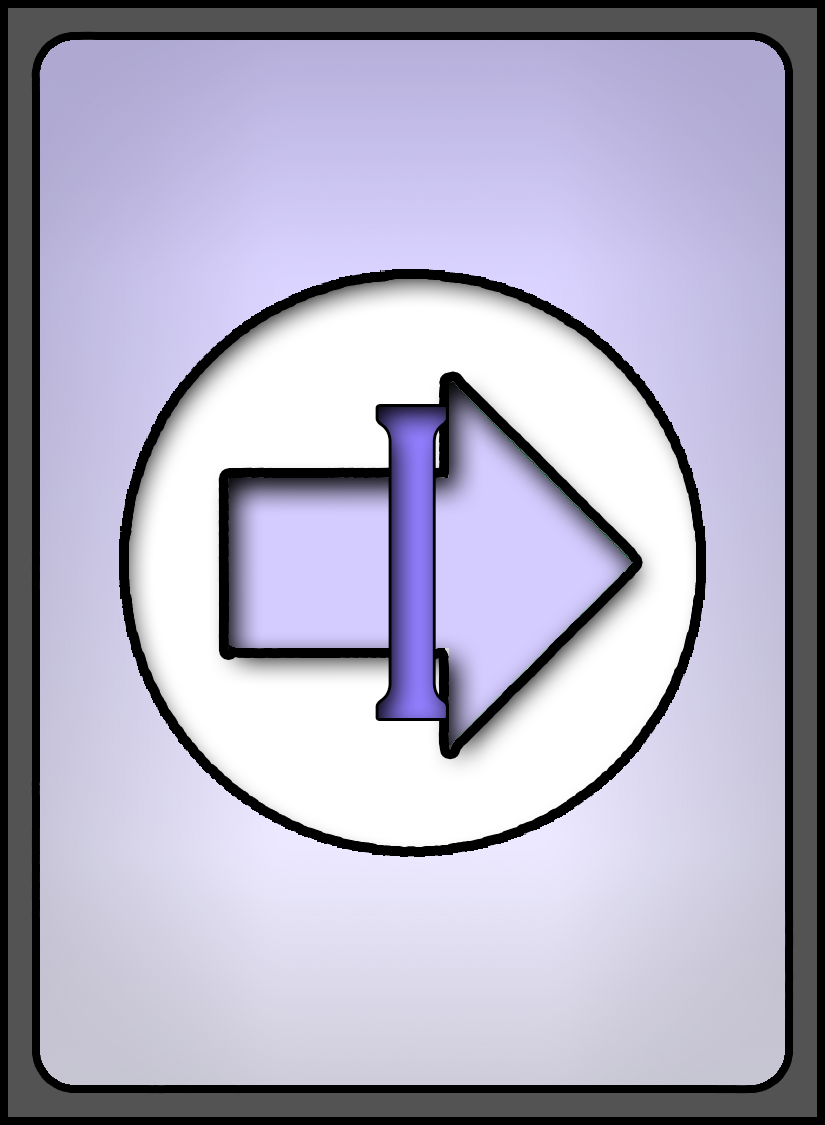
<style>
.page{position:relative;width:825px;height:1125px}
.page>*{position:absolute;margin:0}
.t1{font:416.7px "GloucesterMT-ExtraCondensed"}
</style>
<div class="page">
<p class="t1" style="left:375px;top:404px;width:74px;height:317px">I</p>
</div>
